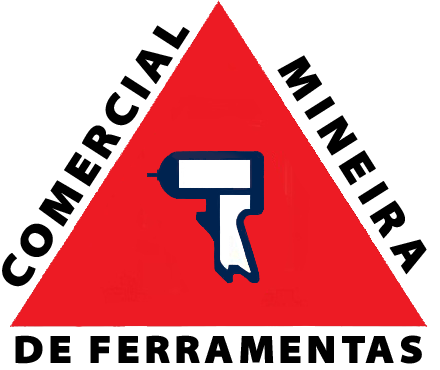
<style>
.page{position:relative;width:440px;height:370px;background:#ffffff}
.page>*{position:absolute;margin:0}
.t1{font:45.3px "Santana-Black";letter-spacing:0.16em;color:#000000}
.t2{font:45.3px "Santana-Black";letter-spacing:0.2em;color:#000000}
.t3{font:40px "Santana-Black";letter-spacing:0.1em;color:#000000}
</style>
<div class="page">
<p class="t1" style="left:2px;top:25px;width:188px;height:262px;rotate:-57deg">COMERCIAL</p>
<p class="t2" style="left:277px;top:55px;width:150px;height:220px;rotate:58deg">MINEIRA</p>
<p class="t3" style="left:15px;top:335px;width:407px;height:29px">DE FERRAMENTAS</p>
</div>
